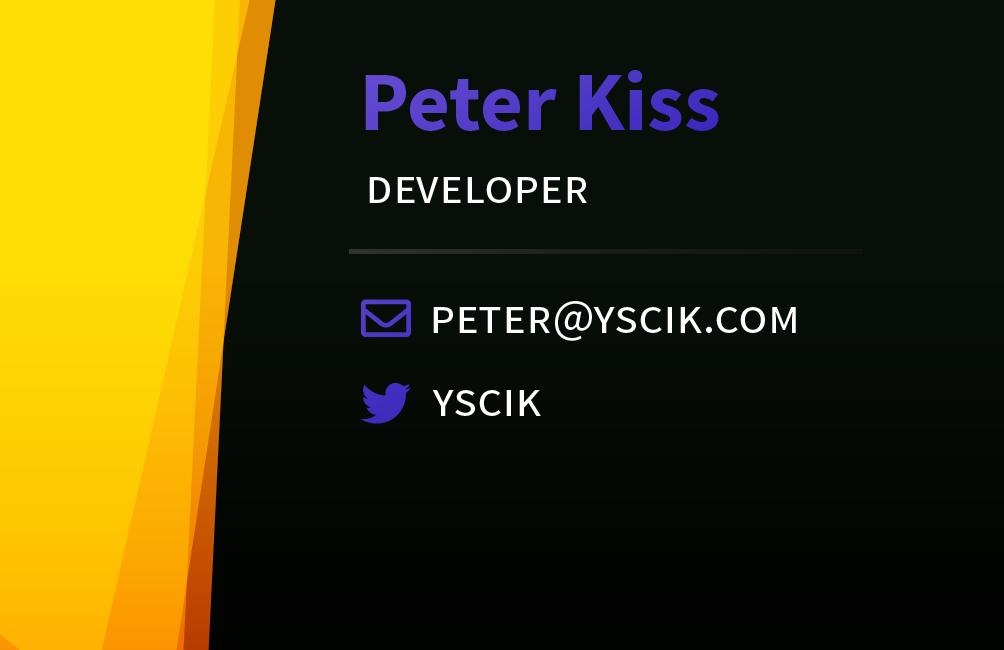
<style>
.page{position:relative;width:1004px;height:650px;background:#080f08}
.page>*{position:absolute;margin:0}
.t1{font:83.3px "SourceSansPro-Bold";color:#513ac7}
.t2{font:50px "SourceSansPro-Regular";color:#ffffff;font-variant:small-caps}
</style>
<div class="page">
<p class="t1" style="left:365px;top:70px;width:354px;height:61px">Peter Kiss</p>
<p class="t2" style="left:369px;top:177px;width:218px;height:26px">developer</p>
<p class="t2" style="left:433px;top:301px;width:363px;height:40px">peter@yscik.com</p>
<p class="t2" style="left:432px;top:390px;width:109px;height:26px">yscik</p>
</div>
